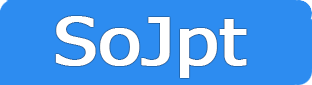
<style>
.page{position:relative;width:312px;height:85px;background:#2d8cf0}
.page>*{position:absolute;margin:0}
.t1{font:64.4px "Tahoma";color:#ffffff;font-weight:bold;scale:1.19 1}
</style>
<div class="page">
<p class="t1" style="left:55px;top:16px;width:192px;height:62px">SoJpt</p>
</div>
